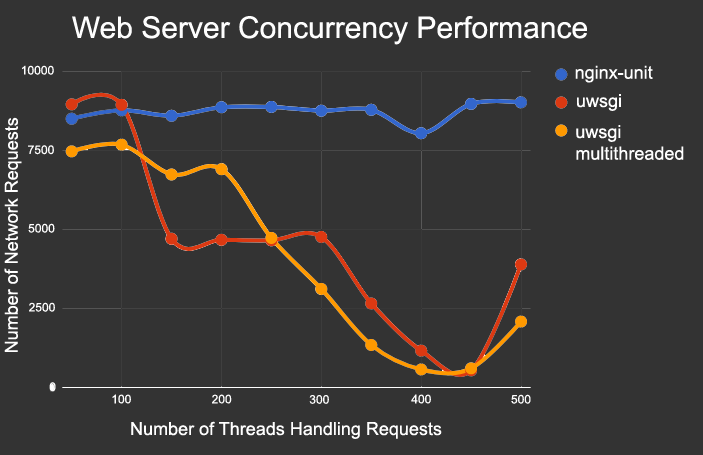
<style>
.page{position:relative;width:703px;height:455px;background:#333333}
.page>*{position:absolute;margin:0}
.t1{font:30px "ArialMT";color:#fefefe}
.t2{font:12px "ArialMT";color:#fefefe}
.t3{font:18px "ArialMT";color:#ffffff}
</style>
<div class="page">
<p class="t1" style="left:72px;top:16px;width:515px;height:29px">Web Server Concurrency Performance</p>
<p class="t2" style="left:22px;top:65px;width:32px;height:10px">10000</p>
<p class="t3" style="left:575px;top:65px;width:78px;height:18px">nginx-unit</p>
<p class="t3" style="left:577px;top:94px;width:44px;height:17px">uwsgi</p>
<p class="t3" style="left:4px;top:117px;width:18px;height:235px;rotate:-90deg">Number of Network Requests</p>
<p class="t3" style="left:576px;top:125px;width:108px;height:35px">uwsgi <br>multithreaded</p>
<p class="t2" style="left:28px;top:145px;width:26px;height:10px">7500</p>
<p class="t2" style="left:28px;top:223px;width:27px;height:10px">5000</p>
<p class="t2" style="left:29px;top:302px;width:26px;height:10px">2500</p>
<p class="t2" style="left:49px;top:382px;width:7px;height:10px">0</p>
<p class="t2" style="left:112px;top:394px;width:19px;height:10px">100</p>
<p class="t2" style="left:212px;top:394px;width:20px;height:10px">200</p>
<p class="t2" style="left:309px;top:395px;width:20px;height:9px">300</p>
<p class="t2" style="left:411px;top:394px;width:20px;height:10px">400</p>
<p class="t2" style="left:511px;top:394px;width:20px;height:10px">500</p>
<p class="t3" style="left:131px;top:421px;width:311px;height:18px">Number of Threads Handling Requests</p>
</div>
